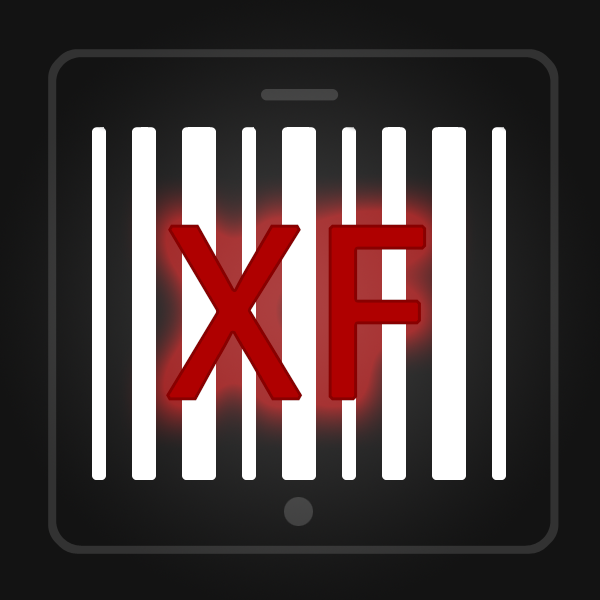
<style>
.page{position:relative;width:600px;height:600px}
.page>*{position:absolute;margin:0}
.t1{font:250px "MyriadPro-Regular";color:#af0000;font-weight:bold}
</style>
<div class="page">
<p class="t1" style="left:166px;top:224px;width:261px;height:177px">XF</p>
</div>
